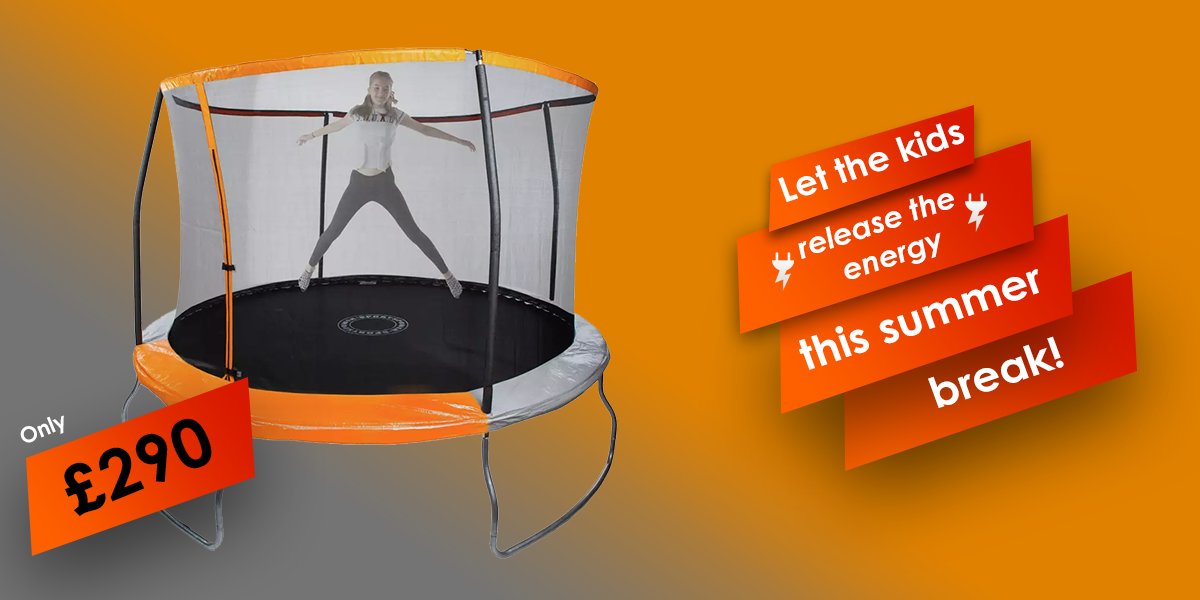
<style>
.page{position:relative;width:1200px;height:600px;background:#e08100}
.page>*{position:absolute;margin:0}
.t1{font:34.5px "CenturyGothic-Bold";color:#ffffff;scale:1.03 1}
.t2{font:29.5px "CenturyGothic-BoldItalic";color:#ffffff;scale:1.03 1}
.t3{font:42.5px "CenturyGothic-Bold";color:#ffffff;scale:1.03 1}
.t4{font:21.6px "CenturyGothic-Bold";color:#ffffff}
.t5{font:67.3px "CenturyGothic-Bold";color:#000000}
</style>
<div class="page">
<p class="t1" style="left:778px;top:123px;width:187px;height:79px;rotate:-19deg">Let the kids</p>
<p class="t2" style="left:798px;top:193px;width:156px;height:86px;text-align:center;rotate:-19deg">release the <br>energy</p>
<p class="t3" style="left:799px;top:269px;width:240px;height:101px;rotate:-19deg">this summer</p>
<p class="t3" style="left:928px;top:336px;width:136px;height:72px;rotate:-19deg">break!</p>
<p class="t4" style="left:20px;top:415px;width:44px;height:28px;rotate:-23deg">Only</p>
<p class="t5" style="left:64px;top:418px;width:148px;height:99px;rotate:-22deg">£290</p>
</div>
